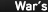
<style>
.page{position:relative;width:48px;height:12px}
.page>*{position:absolute;margin:0}
.t1{font:12.2px "HCRDotum-Bold";color:#ffffff}
</style>
<div class="page">
<p class="t1" style="left:15px;top:1px;width:32px;height:10px">War’s</p>
</div>
